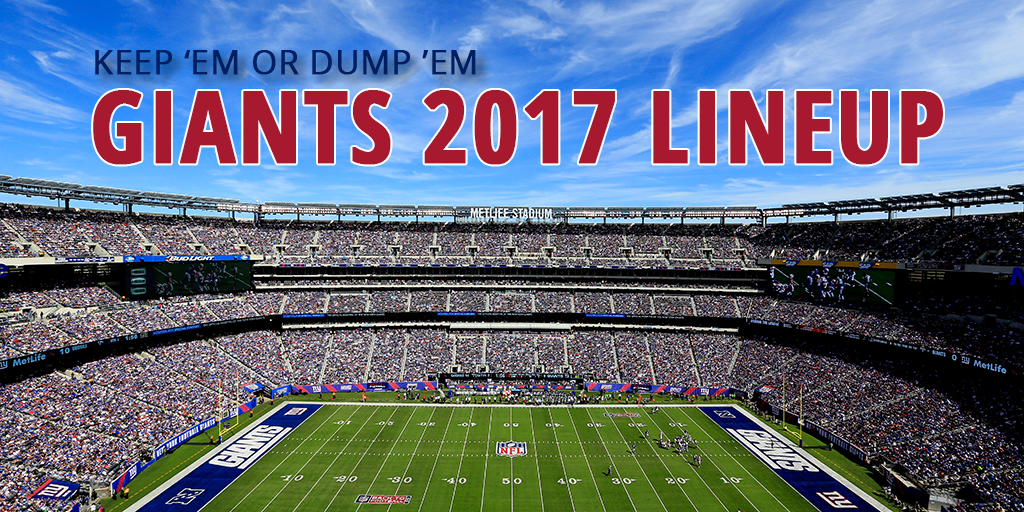
<style>
.page{position:relative;width:1024px;height:512px}
.page>*{position:absolute;margin:0}
.t1{font:33.3px "OpenSans";letter-spacing:0.005em;color:#001e62;text-transform:uppercase;font-weight:bold}
.t2{font:100px "OpenSans-CondensedBold";letter-spacing:0.005em;color:#a6192e;text-transform:uppercase;font-weight:bold}
</style>
<div class="page">
<p class="t1" style="left:95px;top:50px;width:381px;height:25px">KEEP ‘EM OR DUMP ’EM</p>
<p class="t2" style="left:93px;top:90px;width:850px;height:75px">GIANTS 2017 LINEUP</p>
</div>
